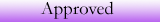
<style>
.page{position:relative;width:160px;height:22px}
.page>*{position:absolute;margin:0}
.t1{font:18.7px "Garamond";color:#000000}
</style>
<div class="page">
<p class="t1" style="left:40px;top:1px;width:74px;height:18px">Approved</p>
</div>
